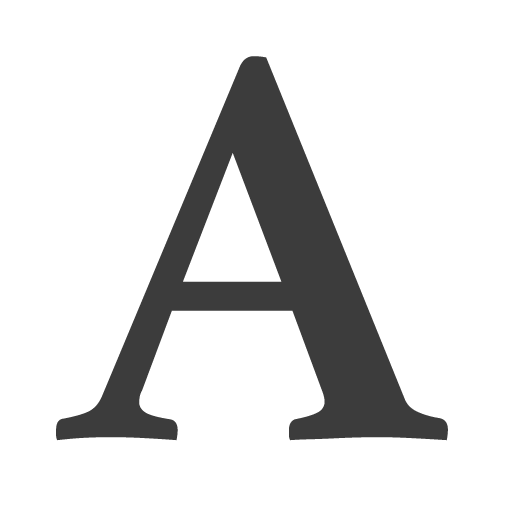
<style>
.page{position:relative;width:512px;height:512px;background:#ffffff}
.page>*{position:absolute;margin:0}
.t1{font:574.9px "Athelas-Bold";color:#3c3c3c}
</style>
<div class="page">
<p class="t1" style="left:56px;top:56px;width:392px;height:385px">A</p>
</div>
